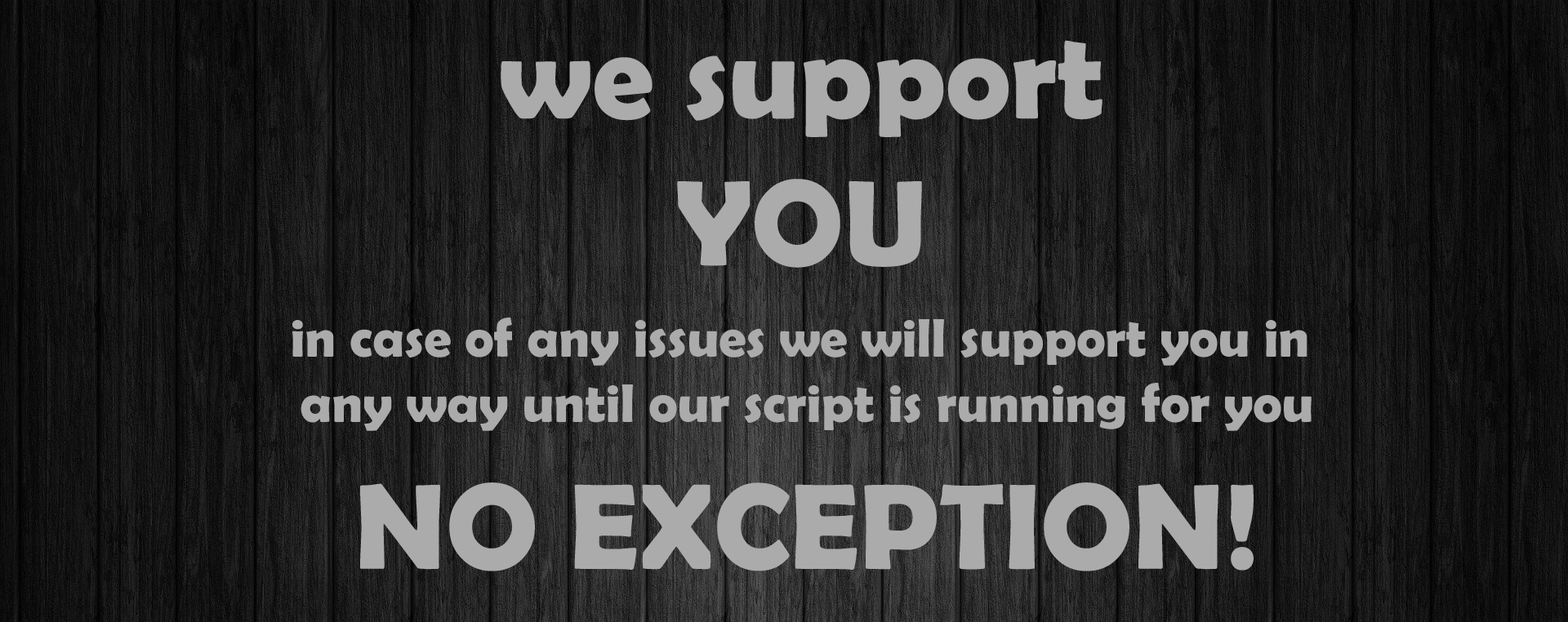
<style>
.page{position:relative;width:1568px;height:622px}
.page>*{position:absolute;margin:0}
.t1{font:122.5px "BerlinSansFBDemi-Bold";color:#ababab}
.t2{font:54.4px "BerlinSansFBDemi-Bold";color:#ababab}
</style>
<div class="page">
<p class="t1" style="left:501px;top:40px;width:601px;height:228px;text-align:center">we support<br>YOU</p>
<p class="t2" style="left:292px;top:318px;width:1020px;height:254px;text-align:center">in case of any issues we will support you in <br>any way until our script is running for you<br><span class="t1">NO EXCEPTION!</span></p>
</div>
